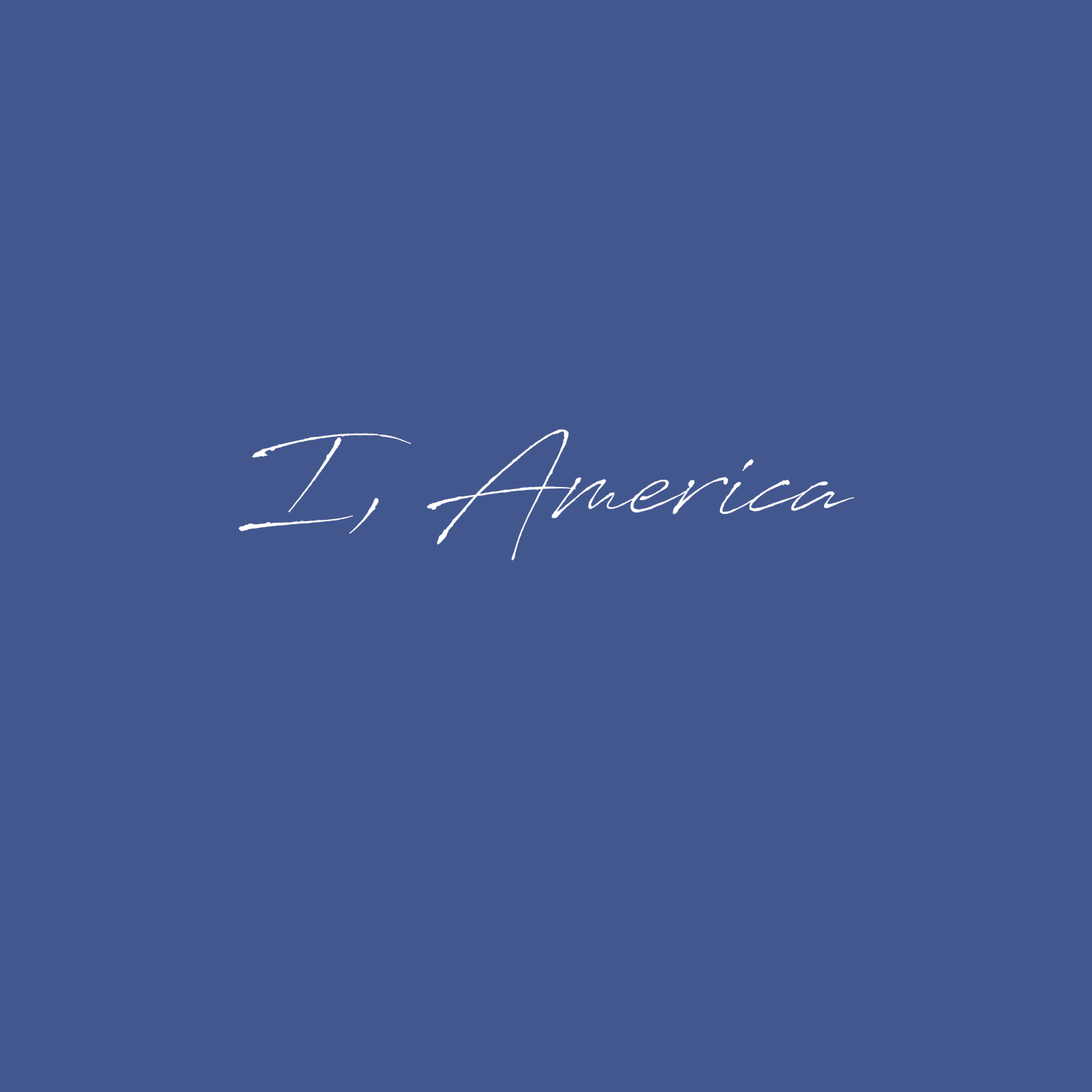
<style>
.page{position:relative;width:1092px;height:1092px;background:#43578f}
.page>*{position:absolute;margin:0}
.t1{font:121.3px "AntroVectra";color:#ffffff}
</style>
<div class="page">
<p class="t1" style="left:238px;top:429px;width:617px;height:132px">I, America</p>
</div>
